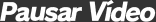
<style>
.page{position:relative;width:156px;height:22px;background:#333333}
.page>*{position:absolute;margin:0}
.t1{font:24.7px "RodinPro-EB";letter-spacing:-0.071em;color:#ffffff;font-style:italic}
</style>
<div class="page">
<p class="t1" style="left:0px;top:0px;width:156px;height:22px">Pausar Vídeo</p>
</div>
